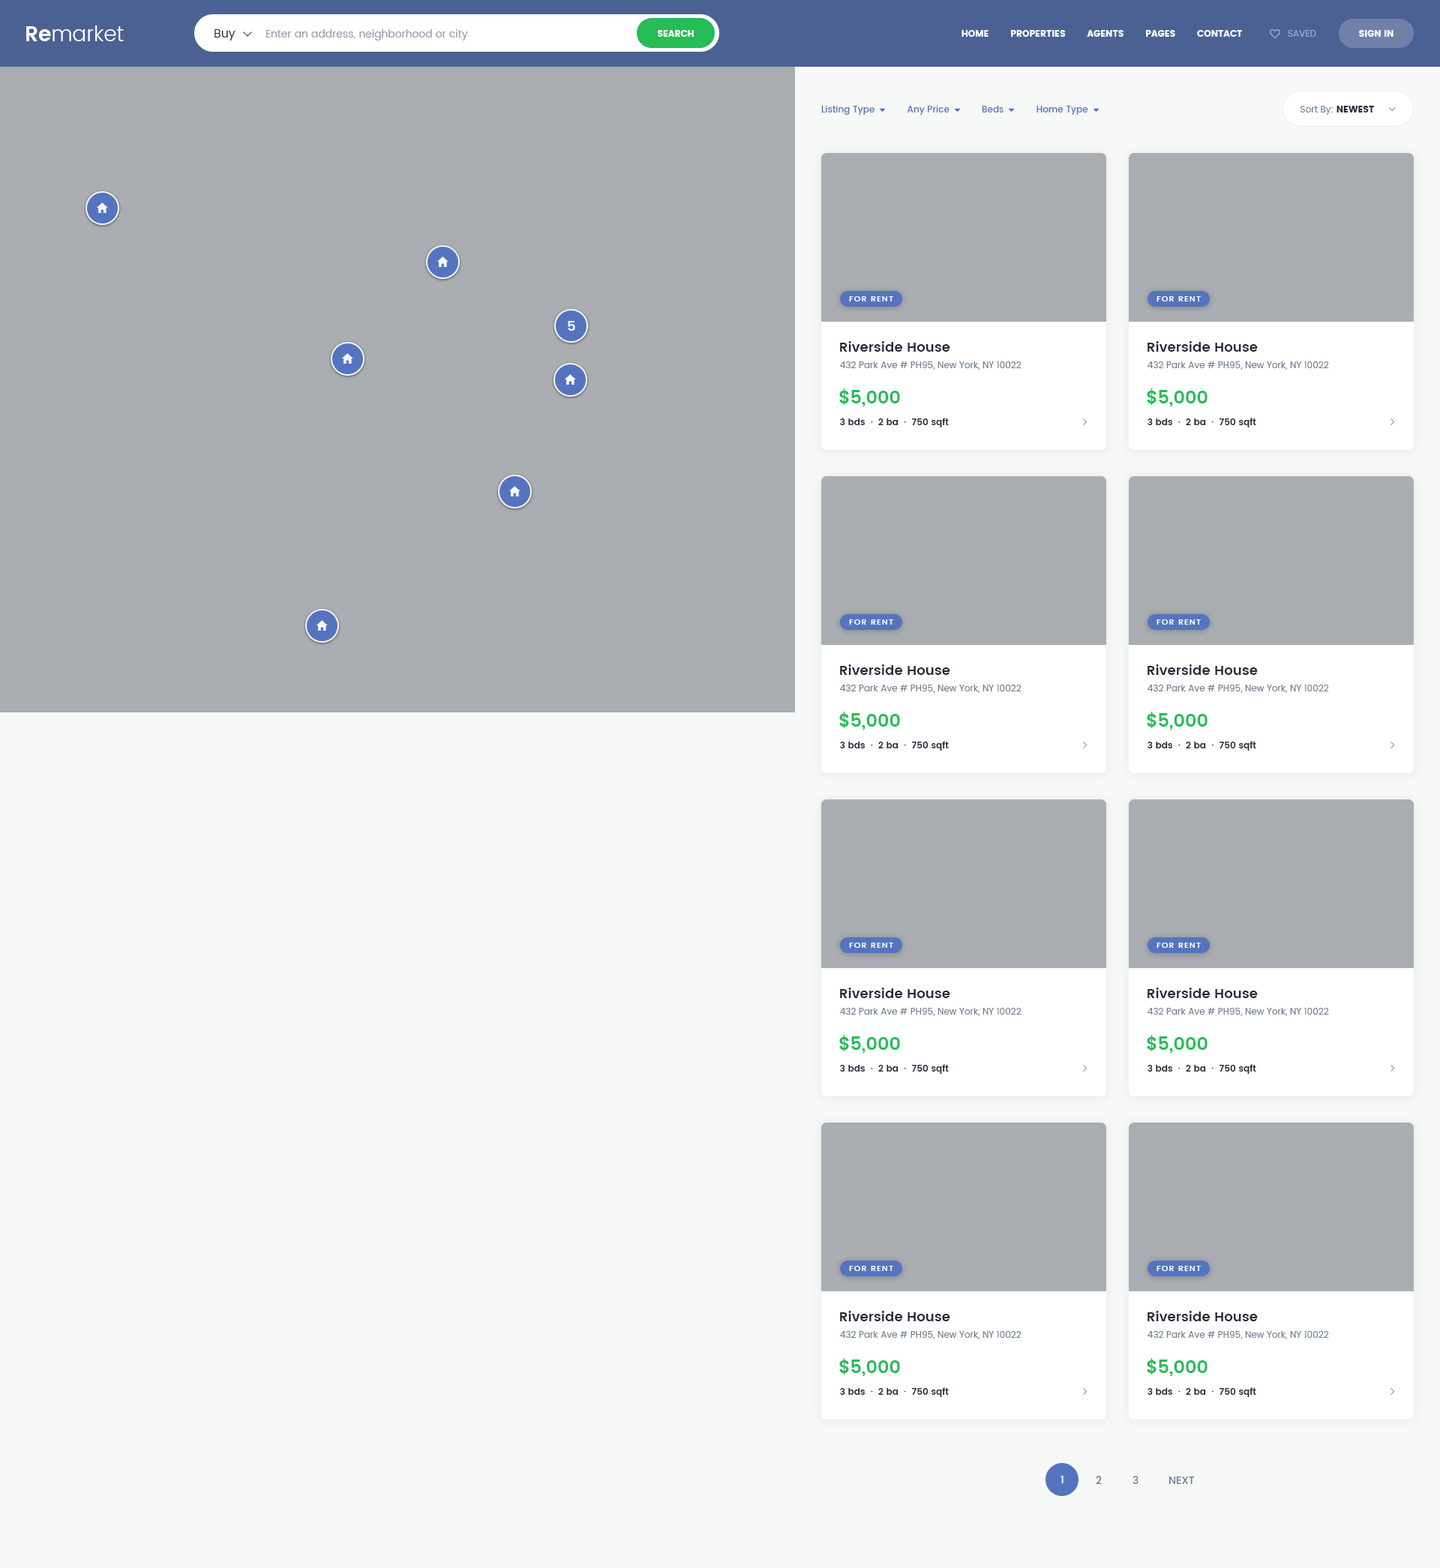
<style>
.page{position:relative;width:1440px;height:1568px;background:#f7f8f8}
.page>*{position:absolute;margin:0}
.t1{font:21px "Poppins-Light";color:#ffffff}
.t2{font:21px "Poppins-SemiBold";color:#ffffff}
.t3{font:12px "Poppins-Regular";color:#242a3a}
.t4{font:10.5px "Poppins-Regular";color:#95a0ad}
.t5{font:9px "Poppins";color:#ffffff;text-transform:uppercase}
.t6{font:9px "Poppins-Regular";color:#93ace2;text-transform:uppercase}
.t7{font:9px "Poppins-Medium";color:#5574bf}
.t8{font:9px "Poppins-Regular";color:#727f90}
.t9{font:9px "Poppins";color:#242a3a;text-transform:uppercase}
.t10{font:8.2px "Poppins-Medium";letter-spacing:0.1em;color:#ffffff;text-transform:uppercase}
.t11{font:13.5px "Poppins-SemiBold";color:#f7f8f8}
.t12{font:13.5px "Poppins-SemiBold";color:#242a3a}
.t13{font:18px "Poppins-SemiBold";color:#26bc58}
.t14{font:9px "Poppins-SemiBold";color:#242a3a}
.t15{font:10.5px "Poppins-Medium";color:#ffffff}
.t16{font:10.5px "Poppins-Medium";color:#727f90}
.t17{font:10.5px "Poppins-Medium";color:#727f90;text-transform:uppercase}
</style>
<div class="page">
<p class="t1" style="left:26px;top:26px;width:98px;height:15px"><span class="t2">Re</span>market</p>
<p class="t3" style="left:214px;top:29px;width:22px;height:11px">Buy</p>
<p class="t4" style="left:266px;top:29px;width:202px;height:11px">Enter an address, neighborhood or city</p>
<p class="t5" style="left:657px;top:30px;width:37px;height:7px">Search</p>
<p class="t5" style="left:962px;top:30px;width:281px;height:7px">Home        Properties        Agents        Pages        Contact</p>
<p class="t6" style="left:1288px;top:30px;width:28px;height:7px">Saved</p>
<p class="t5" style="left:1359px;top:30px;width:35px;height:7px">Sign In</p>
<p class="t7" style="left:821px;top:106px;width:267px;height:9px">Listing Type            Any Price            Beds            Home Type</p>
<p class="t8" style="left:1300px;top:106px;width:75px;height:9px">Sort By:<span class="t9"> Newest</span></p>
<p class="t10" style="left:849px;top:296px;width:44px;height:6px">For rent</p>
<p class="t10" style="left:1156px;top:296px;width:45px;height:6px">For rent</p>
<p class="t11" style="left:568px;top:321px;width:7px;height:10px">5</p>
<p class="t12" style="left:840px;top:341px;width:110px;height:11px">Riverside House</p>
<p class="t12" style="left:1148px;top:341px;width:110px;height:11px">Riverside House</p>
<p class="t8" style="left:840px;top:362px;width:182px;height:8px">432 Park Ave # PH95, New York, NY 10022</p>
<p class="t8" style="left:1148px;top:362px;width:181px;height:8px">432 Park Ave # PH95, New York, NY 10022</p>
<p class="t13" style="left:839px;top:388px;width:61px;height:18px">$5,000</p>
<p class="t13" style="left:1147px;top:388px;width:61px;height:18px">$5,000</p>
<p class="t14" style="left:840px;top:418px;width:109px;height:10px">3 bds  ∙  2 ba  ∙  750 sqft</p>
<p class="t14" style="left:1148px;top:418px;width:108px;height:10px">3 bds  ∙  2 ba  ∙  750 sqft</p>
<p class="t10" style="left:849px;top:620px;width:44px;height:5px">For rent</p>
<p class="t10" style="left:1156px;top:620px;width:45px;height:5px">For rent</p>
<p class="t12" style="left:840px;top:664px;width:110px;height:11px">Riverside House</p>
<p class="t12" style="left:1148px;top:664px;width:110px;height:11px">Riverside House</p>
<p class="t8" style="left:840px;top:685px;width:182px;height:8px">432 Park Ave # PH95, New York, NY 10022</p>
<p class="t8" style="left:1148px;top:685px;width:181px;height:8px">432 Park Ave # PH95, New York, NY 10022</p>
<p class="t13" style="left:839px;top:712px;width:61px;height:18px">$5,000</p>
<p class="t13" style="left:1147px;top:712px;width:61px;height:18px">$5,000</p>
<p class="t14" style="left:840px;top:741px;width:109px;height:10px">3 bds  ∙  2 ba  ∙  750 sqft</p>
<p class="t14" style="left:1148px;top:741px;width:108px;height:10px">3 bds  ∙  2 ba  ∙  750 sqft</p>
<p class="t10" style="left:849px;top:943px;width:44px;height:5px">For rent</p>
<p class="t10" style="left:1156px;top:943px;width:45px;height:5px">For rent</p>
<p class="t12" style="left:840px;top:988px;width:110px;height:10px">Riverside House</p>
<p class="t12" style="left:1148px;top:988px;width:110px;height:10px">Riverside House</p>
<p class="t8" style="left:840px;top:1008px;width:182px;height:8px">432 Park Ave # PH95, New York, NY 10022</p>
<p class="t8" style="left:1148px;top:1008px;width:181px;height:8px">432 Park Ave # PH95, New York, NY 10022</p>
<p class="t13" style="left:839px;top:1035px;width:61px;height:18px">$5,000</p>
<p class="t13" style="left:1147px;top:1035px;width:61px;height:18px">$5,000</p>
<p class="t14" style="left:840px;top:1064px;width:109px;height:10px">3 bds  ∙  2 ba  ∙  750 sqft</p>
<p class="t14" style="left:1148px;top:1064px;width:108px;height:10px">3 bds  ∙  2 ba  ∙  750 sqft</p>
<p class="t10" style="left:849px;top:1266px;width:44px;height:5px">For rent</p>
<p class="t10" style="left:1156px;top:1266px;width:45px;height:5px">For rent</p>
<p class="t12" style="left:840px;top:1311px;width:110px;height:11px">Riverside House</p>
<p class="t12" style="left:1148px;top:1311px;width:110px;height:11px">Riverside House</p>
<p class="t8" style="left:840px;top:1331px;width:182px;height:9px">432 Park Ave # PH95, New York, NY 10022</p>
<p class="t8" style="left:1148px;top:1331px;width:181px;height:9px">432 Park Ave # PH95, New York, NY 10022</p>
<p class="t13" style="left:839px;top:1358px;width:61px;height:18px">$5,000</p>
<p class="t13" style="left:1147px;top:1358px;width:61px;height:18px">$5,000</p>
<p class="t14" style="left:840px;top:1388px;width:109px;height:9px">3 bds  ∙  2 ba  ∙  750 sqft</p>
<p class="t14" style="left:1148px;top:1388px;width:108px;height:9px">3 bds  ∙  2 ba  ∙  750 sqft</p>
<p class="t15" style="left:1060px;top:1476px;width:4px;height:8px">1</p>
<p class="t16" style="left:1096px;top:1476px;width:6px;height:8px">2</p>
<p class="t16" style="left:1132px;top:1476px;width:6px;height:8px">3</p>
<p class="t17" style="left:1168px;top:1477px;width:27px;height:7px">Next</p>
</div>
